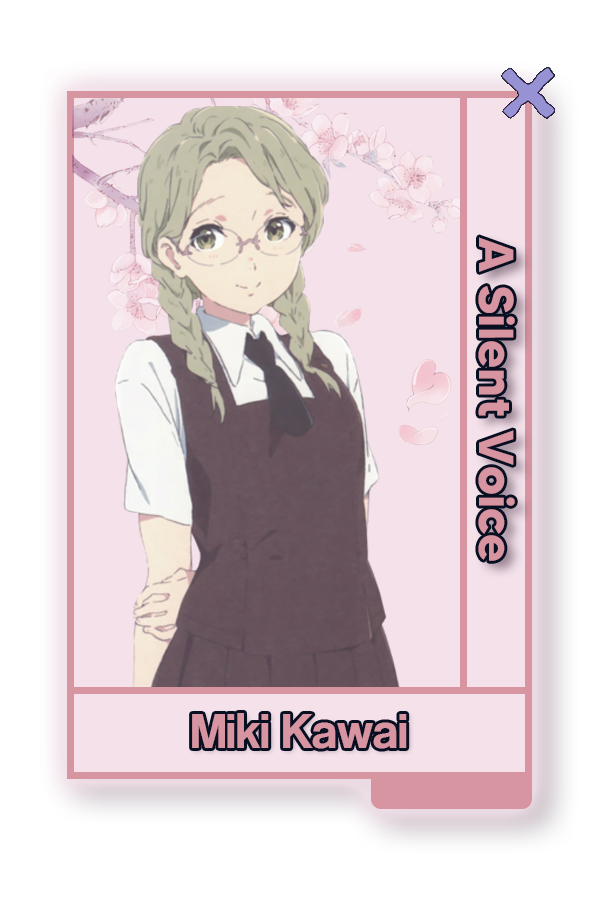
<style>
.page{position:relative;width:600px;height:900px;background:#f4e1ea}
.page>*{position:absolute;margin:0}
.t1{font:48.8px "MADETOMMY-Bold";color:#d49a9c}
.t2{font:50.6px "CoolveticaRg-Regular";color:#d49a9c}
</style>
<div class="page">
<p class="t1" style="left:478px;top:237px;width:37px;height:324px;rotate:90deg">A Silent Voice</p>
<p class="t2" style="left:192px;top:713px;width:215px;height:36px">Miki Kawai</p>
</div>
